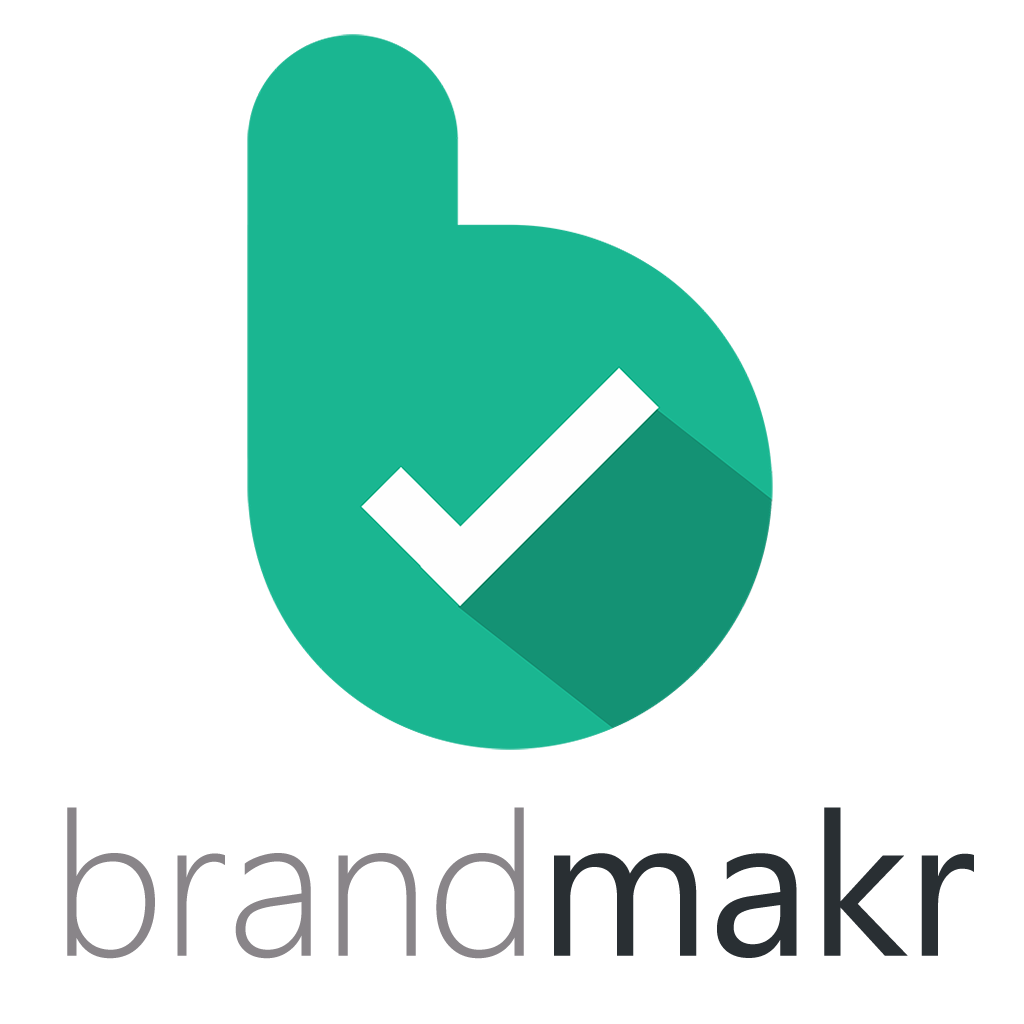
<style>
.page{position:relative;width:1024px;height:1024px;background:#ffffff}
.page>*{position:absolute;margin:0}
.t1{font:200px "SegoeUI-Light";letter-spacing:-0.01em;color:#898589}
.t2{font:200px "SegoeUI";letter-spacing:-0.01em;color:#292f33}
</style>
<div class="page">
<p class="t1" style="left:67px;top:807px;width:907px;height:152px">brand<span class="t2">makr</span></p>
</div>
